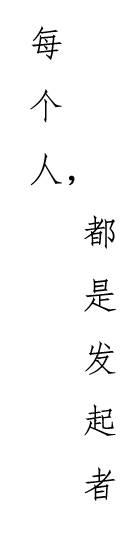
<style>
.page{position:relative;width:140px;height:540px;background:#ffffff}
.page>*{position:absolute;margin:0}
.t1{font:36px "FangSong";color:#000000}
</style>
<div class="page">
<p class="t1" style="left:30px;top:26px;width:86px;height:475px">每<br>个<br>人，<br>   都<br>   是<br>   发<br>   起<br>   者</p>
</div>
